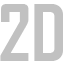
<style>
.page{position:relative;width:64px;height:64px;background:#ffffff}
.page>*{position:absolute;margin:0}
.t1{font:75px "AgencyFB-Bold";color:#c1c1c1}
</style>
<div class="page">
<p class="t1" style="left:0px;top:4px;width:63px;height:57px">2D</p>
</div>
